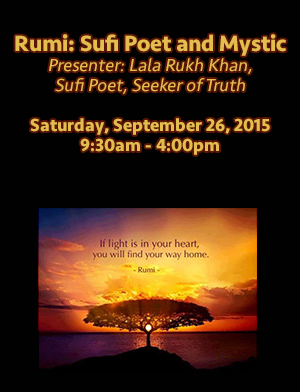
<style>
.page{position:relative;width:300px;height:392px;background:#000100}
.page>*{position:absolute;margin:0}
.t1{font:18px/20px "Seravek";color:#e3bd4d;font-style:italic}
.t2{font:23px/24px "Seravek-Bold";color:#e3bd4d}
.t3{font:18px/20px "Seravek-Bold";color:#e3bd4d}
</style>
<div class="page">
<p class="t1" style="left:15px;top:34px;width:271px;height:121px;text-align:center"><span class="t2">Rumi: Sufi Poet and Mystic<br></span>Presenter: Lala Rukh Khan, <br>Sufi Poet, Seeker of Truth<br><br><span class="t3">Saturday, September 26, 2015<br>9:30am - 4:00pm</span></p>
</div>
